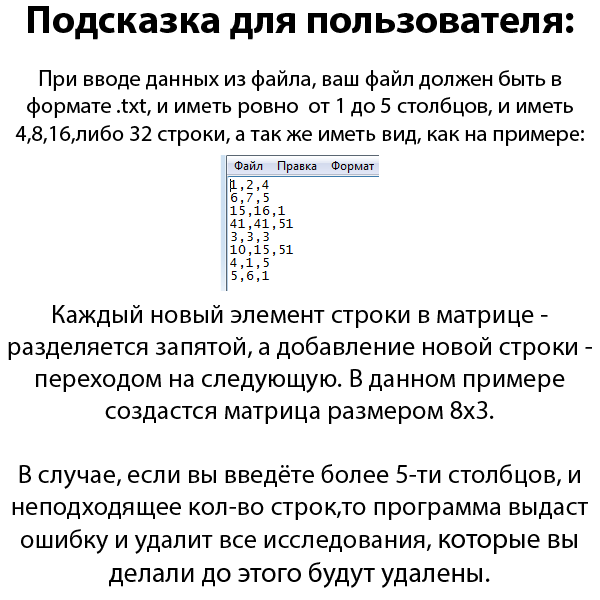
<style>
.page{position:relative;width:600px;height:600px;background:#ffffff}
.page>*{position:absolute;margin:0}
.t1{font:22.7px "MyriadPro-Regular";color:#000000}
.t2{font:40px "MyriadPro-Bold";color:#000000}
.t3{font:26.7px "MyriadPro-Regular";color:#000000}
.t4{font:28px "MyriadPro-Regular";color:#000000}
</style>
<div class="page">
<p class="t1" style="left:15px;top:6px;width:569px;height:140px;text-align:center"><span class="t2">Подсказка для пользователя: <br><br></span>При вводе данных из файла, ваш файл должен быть в формате .txt, и иметь ровно  от 1 до 5 столбцов, и иметь 4,8,16,либо 32 строки, а так же иметь вид, как на примере:</p>
<p class="t3" style="left:8px;top:305px;width:584px;height:283px;text-align:center"><span class="t4"><br></span>Каждый новый элемент строки в матрице - разделяется запятой, а добавление новой строки - переходом на следующую. В данном примере создастся матрица размером 8х3.<br><br>В случае, если вы введёте более 5-ти столбцов, и неподходящее кол-во строк,то программа выдаст ошибку и удалит все исследования, <span class="t4">которые вы делали до этого будут удалены.</span></p>
</div>
